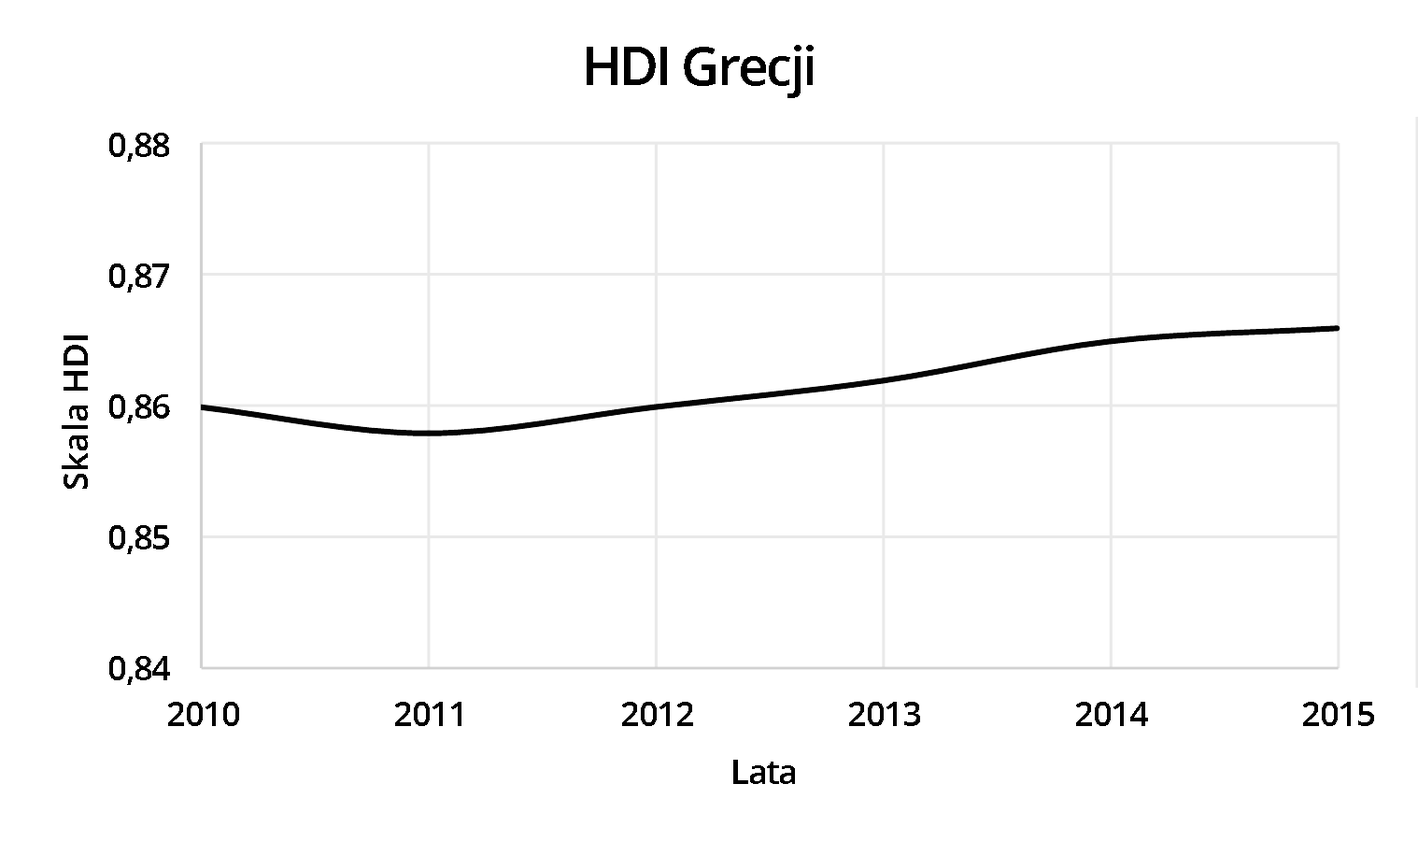
<style>
.page{position:relative;width:1418px;height:841px;background:#ffffff}
.page>*{position:absolute;margin:0}
.t1{font:53.6px "OpenSans-Semibold";letter-spacing:-0.05em;color:#000000}
.t2{font:34.9px "OpenSans-Semibold";letter-spacing:-0.05em;color:#000000}
.t3{font:34.9px "OpenSans-Semibold";letter-spacing:-0.01em;color:#000000}
</style>
<div class="page">
<p class="t1" style="left:587px;top:45px;width:227px;height:53px">HDI Grecji</p>
<p class="t2" style="left:109px;top:133px;width:60px;height:29px">0,88</p>
<p class="t2" style="left:109px;top:263px;width:60px;height:29px">0,87</p>
<p class="t3" style="left:62px;top:335px;width:26px;height:154px;rotate:-90deg">Skala HDI</p>
<p class="t2" style="left:109px;top:394px;width:61px;height:29px">0,86</p>
<p class="t2" style="left:109px;top:525px;width:60px;height:29px">0,85</p>
<p class="t2" style="left:109px;top:656px;width:61px;height:29px">0,84</p>
<p class="t2" style="left:168px;top:702px;width:71px;height:24px">2010</p>
<p class="t2" style="left:395px;top:702px;width:67px;height:24px">2011</p>
<p class="t2" style="left:622px;top:702px;width:71px;height:24px">2012</p>
<p class="t2" style="left:849px;top:702px;width:71px;height:24px">2013</p>
<p class="t2" style="left:1076px;top:702px;width:72px;height:24px">2014</p>
<p class="t2" style="left:1303px;top:702px;width:71px;height:24px">2015</p>
<p class="t2" style="left:733px;top:760px;width:62px;height:24px">Lata</p>
</div>
